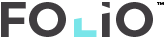
<style>
.page{position:relative;width:166px;height:39px;background:#ffffff}
.page>*{position:absolute;margin:0}
.t1{font:49.4px "Montserrat-SemiBold";letter-spacing:0.03em;color:#403d40;text-transform:uppercase}
.t2{font:49.4px "Montserrat-SemiBold";letter-spacing:0.03em;color:#79e5e9;text-transform:uppercase}
.t3{font:4.4px "Montserrat-SemiBold";letter-spacing:0.03em;color:#070707;text-transform:uppercase}
</style>
<div class="page">
<p class="t1" style="left:1px;top:2px;width:152px;height:35px">fo<span class="t2">l</span>io</p>
<p class="t3" style="left:157px;top:2px;width:7px;height:3px">TM</p>
</div>
